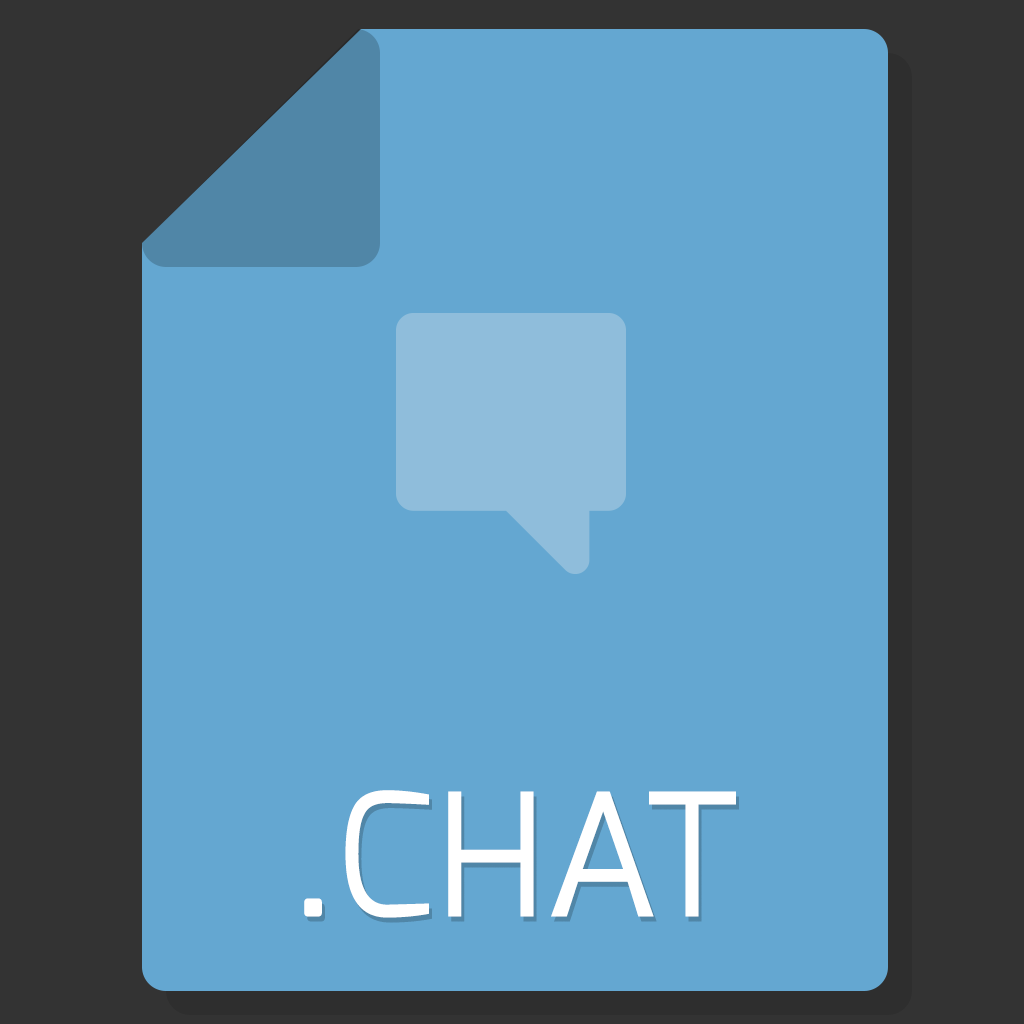
<style>
.page{position:relative;width:1024px;height:1024px;background:#64a7d1}
.page>*{position:absolute;margin:0}
.t1{font:170.3px "Exo-Regular";color:#ffffff}
</style>
<div class="page">
<p class="t1" style="left:304px;top:790px;width:432px;height:128px">.CHAT</p>
</div>
